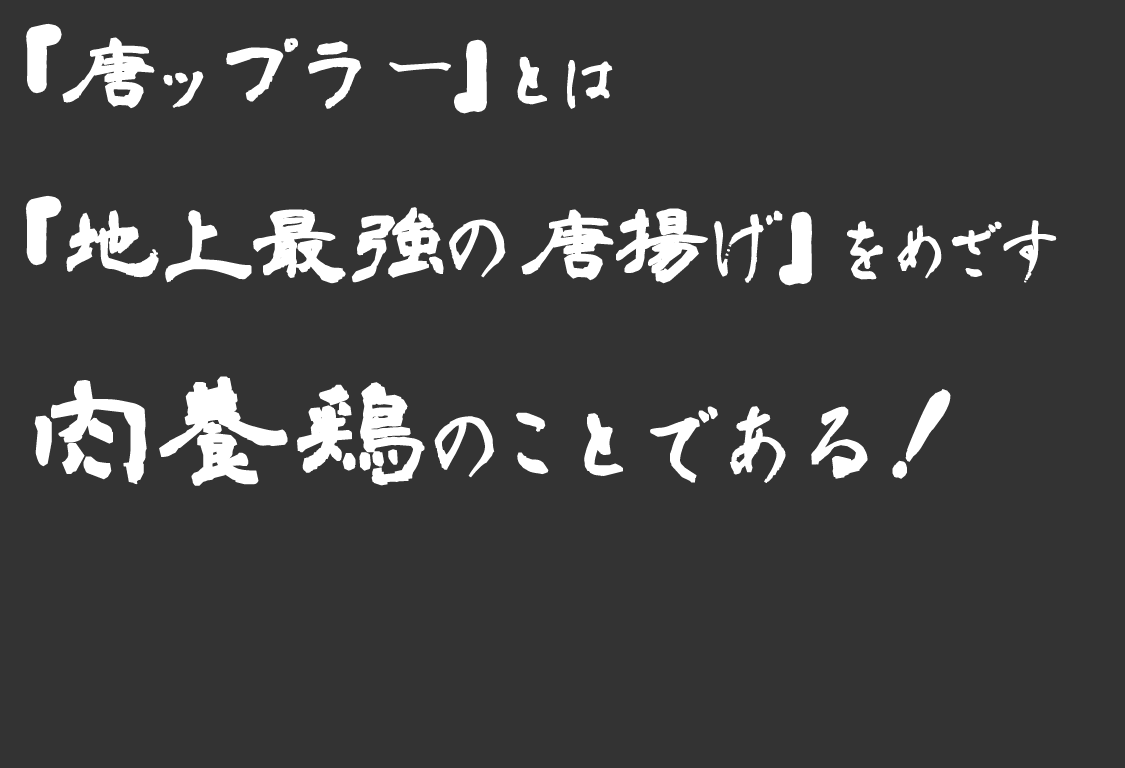
<style>
.page{position:relative;width:1125px;height:768px;background:#333333}
.page>*{position:absolute;margin:0}
.t1{font:90px "aoyagireisyo2";color:#ffffff;font-weight:bold}
.t2{font:90px/172px "aoyagireisyo2";color:#ffffff;font-weight:bold}
.t3{font:90px/172px "aoyagireisyo2";letter-spacing:0.2em;color:#ffffff;font-weight:bold}
.t4{font:72px/172px "aoyagireisyo2";letter-spacing:-0.075em;color:#ffffff;font-weight:bold}
.t5{font:125px/200px "aoyagireisyo2";color:#ffffff;font-weight:bold}
.t6{font:95px/200px "aoyagireisyo2";color:#ffffff;font-weight:bold}
.t7{font:137.3px "aoyagireisyo2";color:#ffffff;font-weight:bold;font-style:italic}
</style>
<div class="page">
<p class="t1" style="left:33px;top:30px;width:22px;height:57px">「</p>
<p class="t2" style="left:33px;top:31px;width:1024px;height:455px"><span class="t3">「</span>唐ップラー」<span class="t4">とは<br></span><span class="t3">「</span>地上最強の唐揚げ」<span class="t4">をめざす<br></span><span class="t5">肉養鶏</span><span class="t6">のことである</span></p>
<p class="t1" style="left:461px;top:46px;width:19px;height:61px">」</p>
<p class="t1" style="left:32px;top:202px;width:23px;height:57px">「</p>
<p class="t1" style="left:786px;top:218px;width:19px;height:61px">」</p>
<p class="t7" style="left:892px;top:389px;width:59px;height:90px;rotate:20deg">！</p>
</div>
